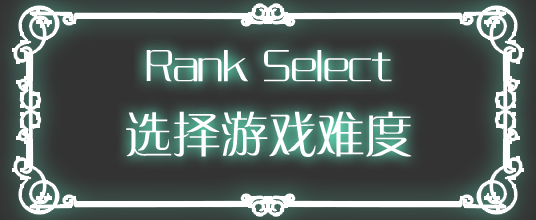
<style>
.page{position:relative;width:536px;height:220px}
.page>*{position:absolute;margin:0}
.t1{font:48px "FZZQJW--GB1-0";color:#ffffff}
</style>
<div class="page">
<p class="t1" style="left:146px;top:50px;width:246px;height:32px">Rank Select</p>
<p class="t1" style="left:126px;top:111px;width:286px;height:46px">选择游戏难度</p>
</div>
